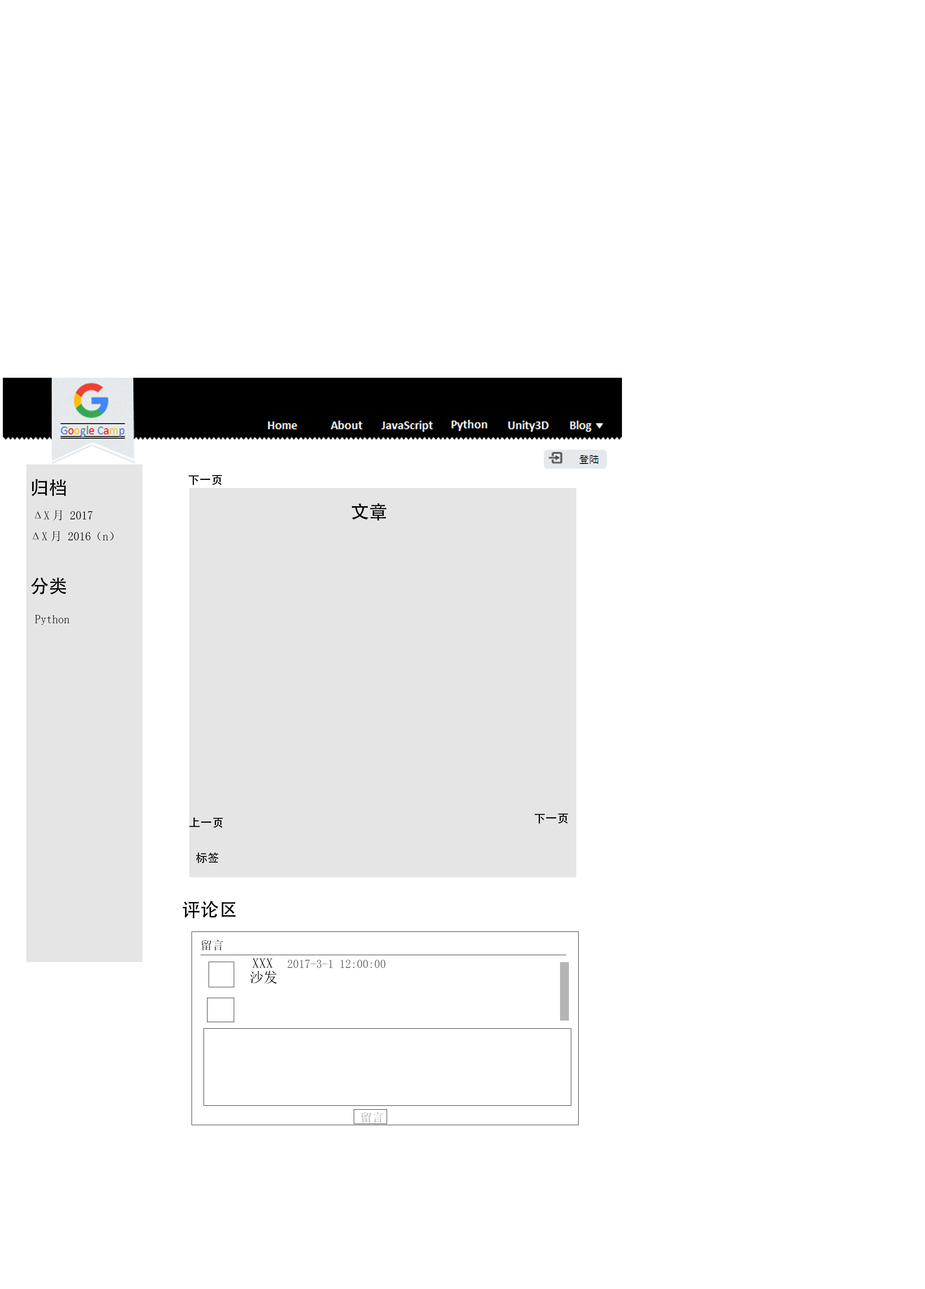
<style>
.page{position:relative;width:925px;height:1289px;background:#ffffff}
.page>*{position:absolute;margin:0}
.t1{font:18.6px "AdobeHeitiStd-Regular";color:#000000}
.t2{font:11.6px "AdobeHeitiStd-Regular";color:#000000}
.t3{font:11.6px "SimSun";color:#000000}
.t4{font:11.6px "SimSun";color:#050505}
.t5{font:13.9px "SimSun";color:#000000}
.t6{font:11.6px "SimSun";color:#615c5c}
.t7{font:11.6px "SimSun";color:#a99e9e}
</style>
<div class="page">
<p class="t1" style="left:31px;top:479px;width:35px;height:17px">归档</p>
<p class="t2" style="left:189px;top:475px;width:33px;height:10px">下一页</p>
<p class="t3" style="left:35px;top:510px;width:58px;height:10px">ΔX月 2017</p>
<p class="t1" style="left:352px;top:503px;width:34px;height:17px">文章</p>
<p class="t3" style="left:33px;top:531px;width:81px;height:10px">ΔX月 2016（n）</p>
<p class="t1" style="left:31px;top:577px;width:35px;height:17px">分类</p>
<p class="t4" style="left:35px;top:615px;width:35px;height:10px">Python</p>
<p class="t2" style="left:189px;top:817px;width:34px;height:11px">上一页</p>
<p class="t2" style="left:535px;top:813px;width:33px;height:11px">下一页</p>
<p class="t2" style="left:196px;top:852px;width:23px;height:11px">标签</p>
<p class="t1" style="left:183px;top:900px;width:53px;height:18px">评论区</p>
<p class="t3" style="left:202px;top:939px;width:21px;height:11px">留言</p>
<p class="t5" style="left:252px;top:958px;width:21px;height:10px">XXX</p>
<p class="t6" style="left:288px;top:959px;width:98px;height:9px">2017-3-1 12:00:00</p>
<p class="t5" style="left:250px;top:970px;width:27px;height:13px">沙发</p>
<p class="t7" style="left:362px;top:1112px;width:21px;height:10px">留言</p>
</div>
